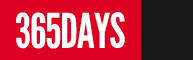
<style>
.page{position:relative;width:193px;height:60px;background:#de0021}
.page>*{position:absolute;margin:0}
.t1{font:48px "LeagueGothic-Regular";letter-spacing:-0.025em;color:#ffffff}
</style>
<div class="page">
<p class="t1" style="left:16px;top:12px;width:109px;height:37px">365DAYS</p>
</div>
